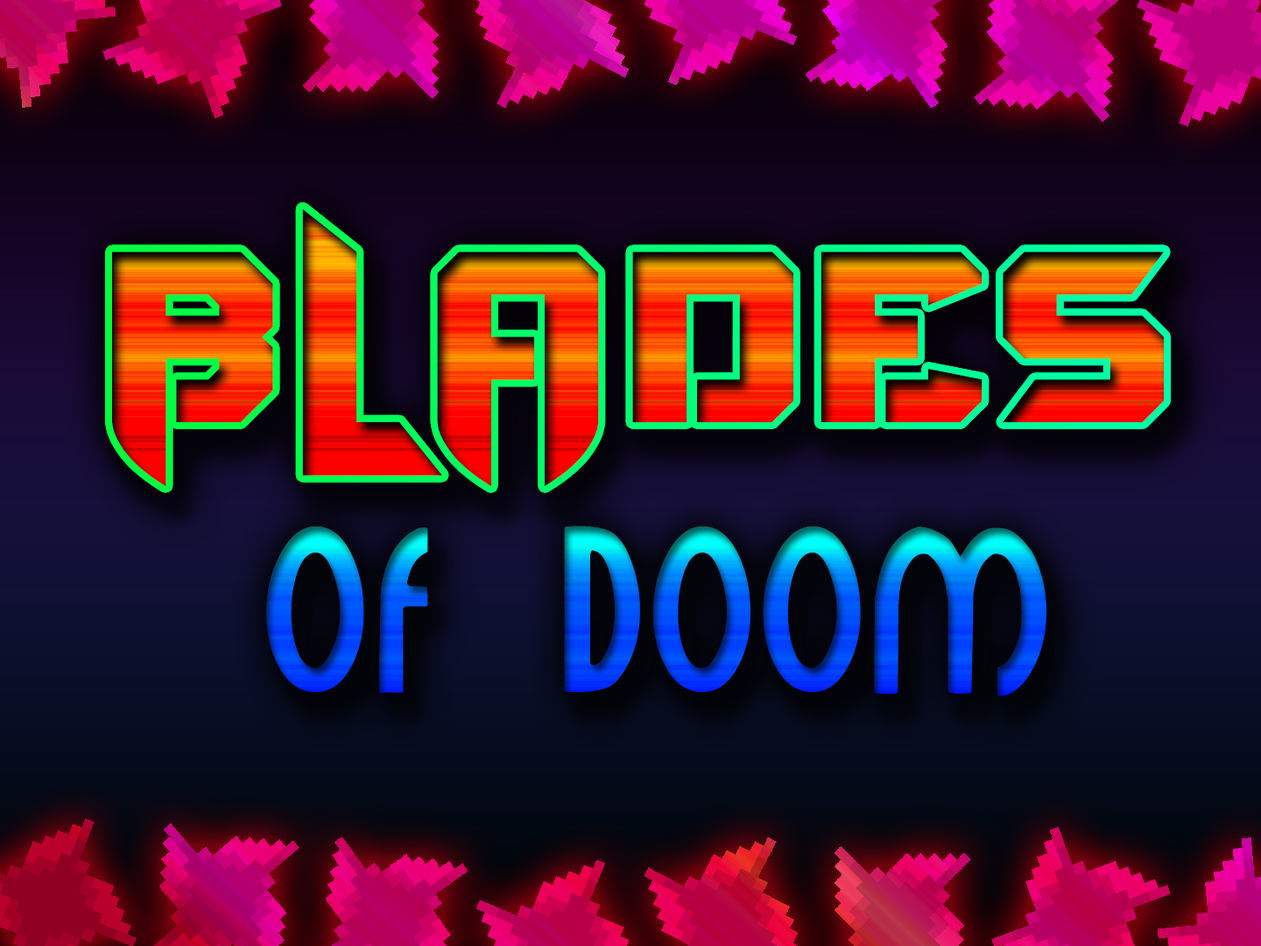
<style>
.page{position:relative;width:1261px;height:946px}
.page>*{position:absolute;margin:0}
.t1{font:234px "BravoDestroyerPersonalUSE-regular";letter-spacing:0.025em}
.t2{font:183.7px "Minerva";letter-spacing:0.025em}
</style>
<div class="page">
<p class="t1" style="left:112px;top:208px;width:1052px;height:278px">BLADES</p>
<p class="t1" style="left:112px;top:208px;width:1052px;height:278px">BLADES</p>
<p class="t2" style="left:266px;top:525px;width:780px;height:171px">OF DOOM</p>
<p class="t2" style="left:266px;top:525px;width:780px;height:171px">OF DOOM</p>
</div>
